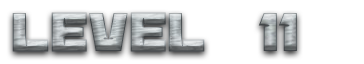
<style>
.page{position:relative;width:364px;height:64px;background:#ffffff}
.page>*{position:absolute;margin:0}
.t1{font:60px "BananaBrick"}
</style>
<div class="page">
<p class="t1" style="left:12px;top:12px;width:285px;height:40px">Level  11</p>
</div>
